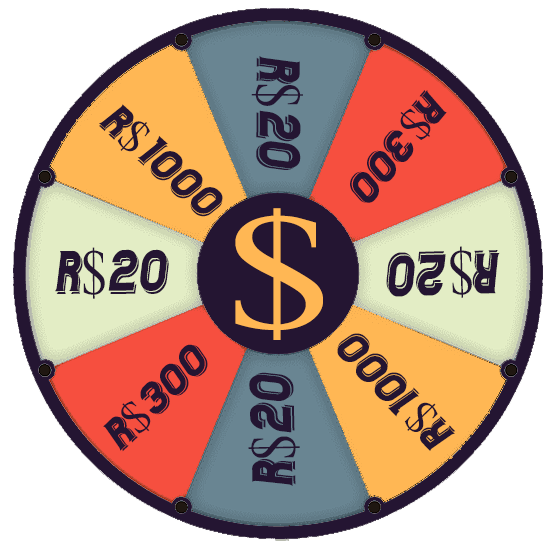
<style>
.page{position:relative;width:550px;height:550px;background:#ffffff}
.page>*{position:absolute;margin:0}
.t1{font:64.5px "CasinoFlatShadow-Italic";color:#241532;scale:0.82 1}
.t2{font:64.5px "TimesNewRomanPSMT";color:#241532;scale:0.82 1}
.t3{font:47.1px "CasinoFlatShadow-Italic";color:#241532}
.t4{font:47.1px "TimesNewRomanPSMT";color:#241532}
.t5{font:47.6px "CasinoFlatShadow-Italic";color:#241532}
.t6{font:47.6px "TimesNewRomanPSMT";color:#241532}
.t7{font:167px "TimesNewRomanPSMT";color:#ffb754;scale:1.32 1}
</style>
<div class="page">
<p class="t1" style="left:251px;top:56px;width:52px;height:114px;rotate:90deg">R<span class="t2">$</span>20</p>
<p class="t3" style="left:350px;top:90px;width:97px;height:113px;rotate:130deg">R<span class="t4">$</span>300</p>
<p class="t5" style="left:99px;top:104px;width:124px;height:113px;rotate:42deg">R<span class="t6">$</span>1000</p>
<p class="t7" style="left:235px;top:208px;width:88px;height:132px">$</p>
<p class="t1" style="left:386px;top:246px;width:114px;height:52px;rotate:178deg">R<span class="t2">$</span>20</p>
<p class="t1" style="left:55px;top:247px;width:114px;height:52px">R<span class="t2">$</span>20</p>
<p class="t5" style="left:337px;top:333px;width:119px;height:118px;rotate:-134deg">R<span class="t6">$</span>1000</p>
<p class="t3" style="left:103px;top:344px;width:105px;height:108px;rotate:-44deg">R<span class="t4">$</span>300</p>
<p class="t1" style="left:248px;top:372px;width:52px;height:114px;rotate:-91deg">R<span class="t2">$</span>20</p>
</div>
